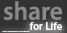
<style>
.page{position:relative;width:67px;height:33px;background:#333333}
.page>*{position:absolute;margin:0}
.t1{font:25.7px "MyriadPro-Semibold";color:#898a8b}
.t2{font:11px "MyriadPro-Semibold";color:#fdfdfd}
</style>
<div class="page">
<p class="t1" style="left:3px;top:1px;width:60px;height:19px">share</p>
<p class="t2" style="left:2px;top:22px;width:60px;height:10px">_____for Life</p>
</div>
